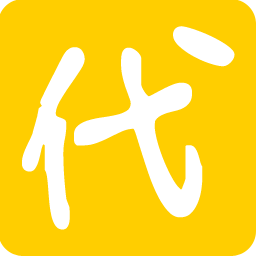
<style>
.page{position:relative;width:256px;height:256px;background:#ffce00}
.page>*{position:absolute;margin:0}
.t1{font:228.6px "AaJoanna";color:#ffffff}
</style>
<div class="page">
<p class="t1" style="left:22px;top:26px;width:213px;height:204px">代</p>
</div>
